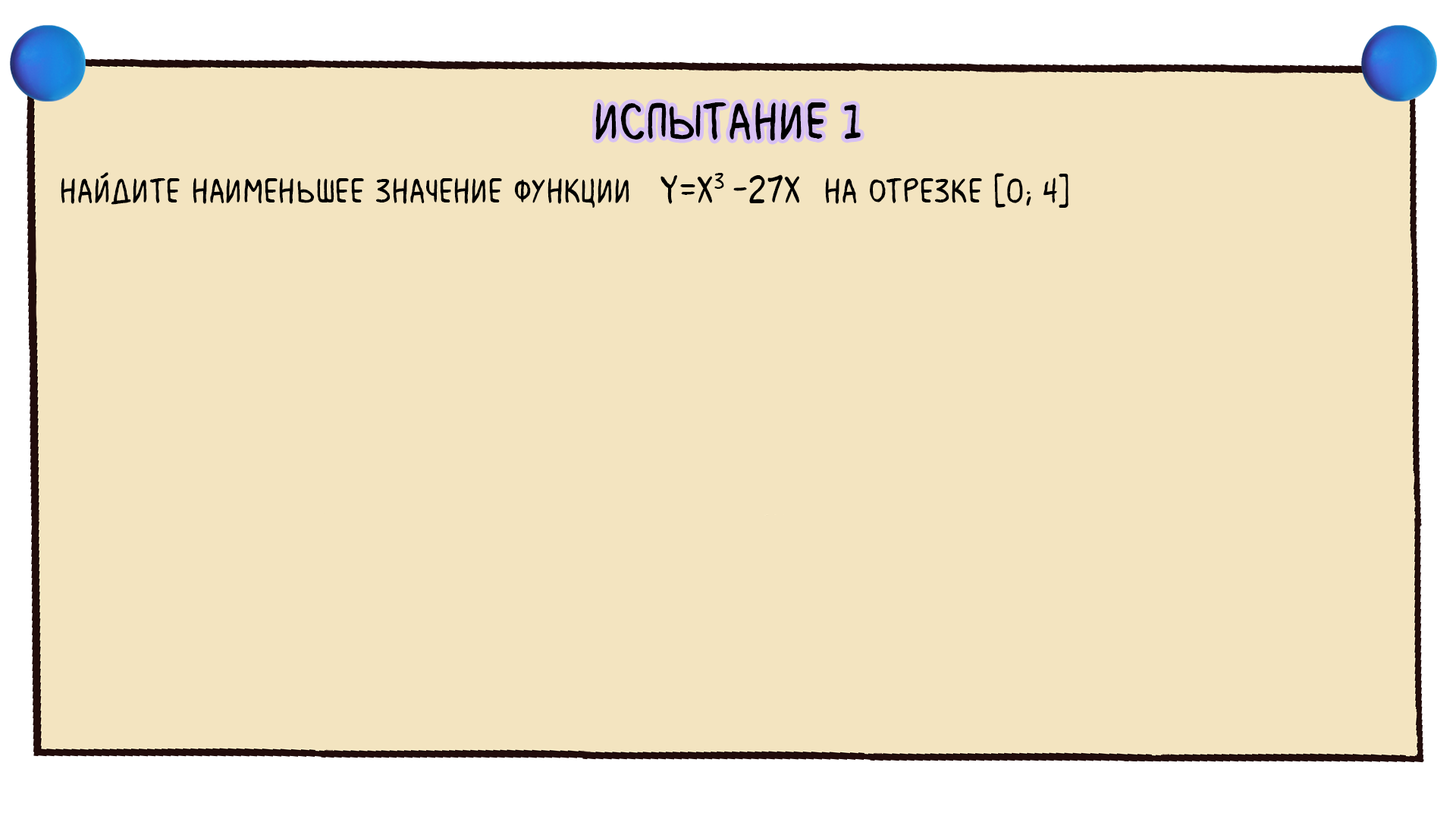
<style>
.page{position:relative;width:1456px;height:819px;background:#f3e4c0}
.page>*{position:absolute;margin:0}
.t1{font:54.6px "MilkMustacheBB";color:#000000}
.t2{font:36.4px "MilkMustacheBB";color:#000000}
.t3{font:41.7px "MilkMustacheBB";color:#000000}
</style>
<div class="page">
<p class="t1" style="left:595px;top:102px;width:266px;height:39px">испытание 1</p>
<p class="t2" style="left:61px;top:172px;width:1007px;height:36px">найдите наименьшее значение функции  <span class="t3">y=x3 -27x </span>на отрезке [0; 4]</p>
</div>
